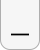
<style>
.page{position:relative;width:40px;height:50px;background:#f6f6f6}
.page>*{position:absolute;margin:0}
.t1{font:36.1px "GrotesqueMTStd";color:#000000}
</style>
<div class="page">
<p class="t1" style="left:11px;top:33px;width:18px;height:3px">_</p>
</div>
